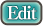
<style>
.page{position:relative;width:43px;height:26px}
.page>*{position:absolute;margin:0}
.t1{font:18px "RyuminPro-ExBold";letter-spacing:-0.08em;color:#ffffff}
</style>
<div class="page">
<p class="t1" style="left:7px;top:5px;width:30px;height:15px">Edit</p>
</div>
